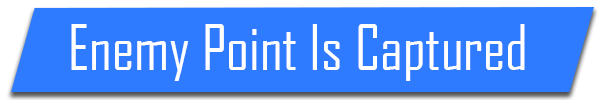
<style>
.page{position:relative;width:598px;height:100px;background:#2f7bff}
.page>*{position:absolute;margin:0}
.t1{font:60px "AgencyFB-Reg";color:#ffffff}
</style>
<div class="page">
<p class="t1" style="left:71px;top:24px;width:454px;height:57px">Enemy Point Is Captured</p>
</div>
